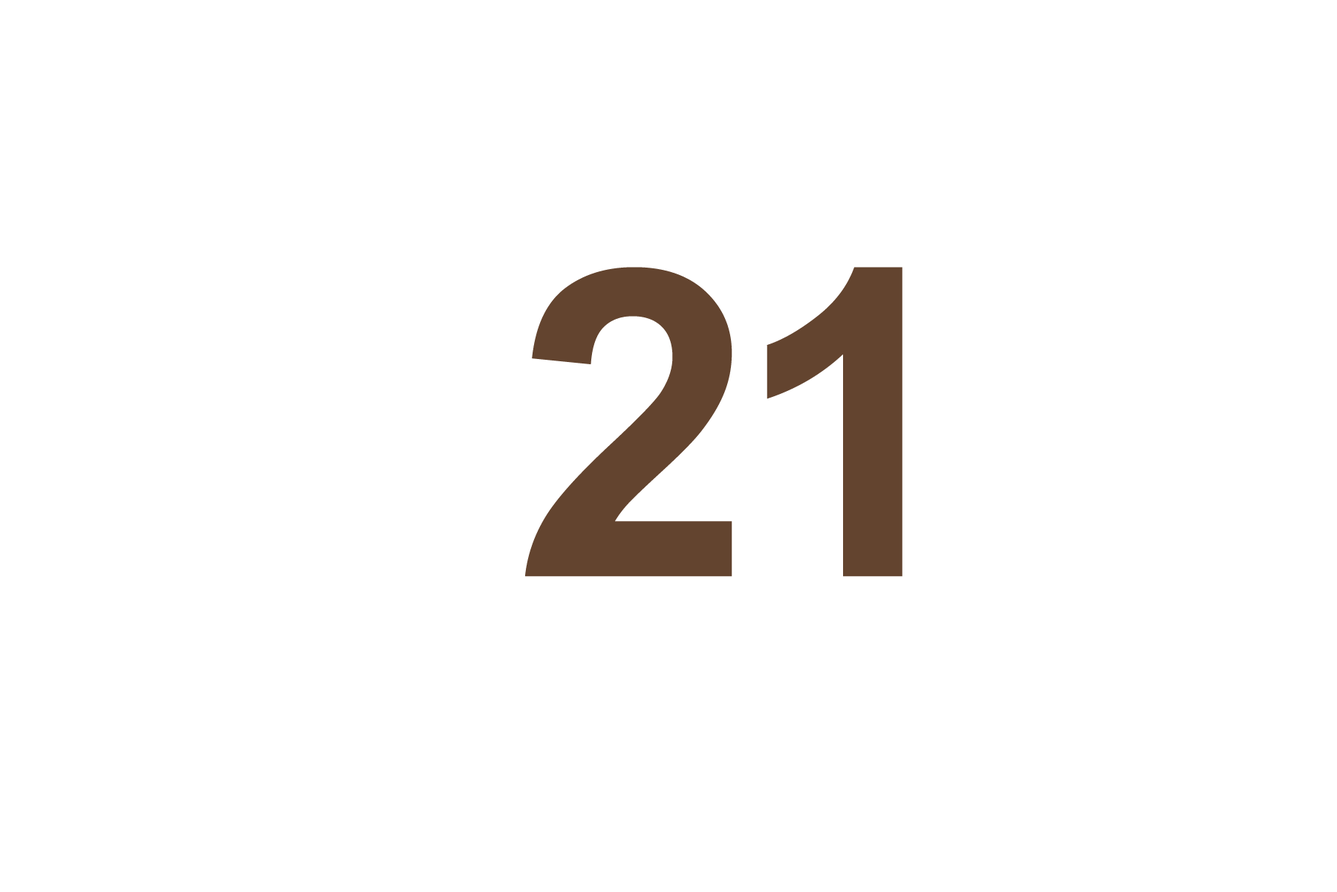
<style>
.page{position:relative;width:1337px;height:892px;background:#ffffff}
.page>*{position:absolute;margin:0}
.t1{font:429.6px "Arial-BoldMT";color:#63442f}
</style>
<div class="page">
<p class="t1" style="left:525px;top:267px;width:378px;height:310px">21</p>
</div>
